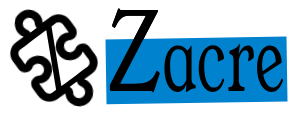
<style>
.page{position:relative;width:295px;height:114px;background:#ffffff}
.page>*{position:absolute;margin:0}
.t1{font:100.8px "YoungSerif-Regular";letter-spacing:0.028em;color:#000000;scale:0.65 1}
.t2{font:122.6px "YoungSerif-Regular";letter-spacing:0.028em;color:#000000;scale:0.65 1}
</style>
<div class="page">
<p class="t1" style="left:109px;top:8px;width:175px;height:85px"><span class="t2">Z</span>acre</p>
<p class="t1" style="left:109px;top:8px;width:175px;height:85px"><span class="t2">Z</span>acre</p>
</div>
